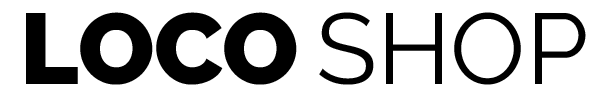
<style>
.page{position:relative;width:610px;height:98px;background:#ffffff}
.page>*{position:absolute;margin:0}
.t1{font:100px "Raleway-Black";color:#000000}
.t2{font:100px "Raleway-Regular";color:#000000}
</style>
<div class="page">
<p class="t1" style="left:26px;top:12px;width:271px;height:73px">LOCO</p>
<p class="t2" style="left:319px;top:12px;width:267px;height:73px">SHOP</p>
</div>
